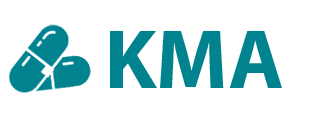
<style>
.page{position:relative;width:320px;height:120px;background:#ffffff}
.page>*{position:absolute;margin:0}
.t1{font:85px "MyriadPro-Bold";color:#00828f}
</style>
<div class="page">
<p class="t1" style="left:110px;top:31px;width:172px;height:57px">KMA</p>
</div>
